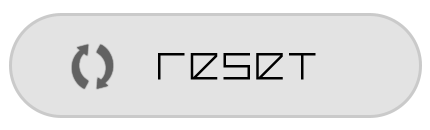
<style>
.page{position:relative;width:430px;height:130px;background:#e3e3e3}
.page>*{position:absolute;margin:0}
.t1{font:77px "AuricomRegular";letter-spacing:0.05em;color:#000000}
</style>
<div class="page">
<p class="t1" style="left:158px;top:53px;width:158px;height:27px">RESET</p>
</div>
